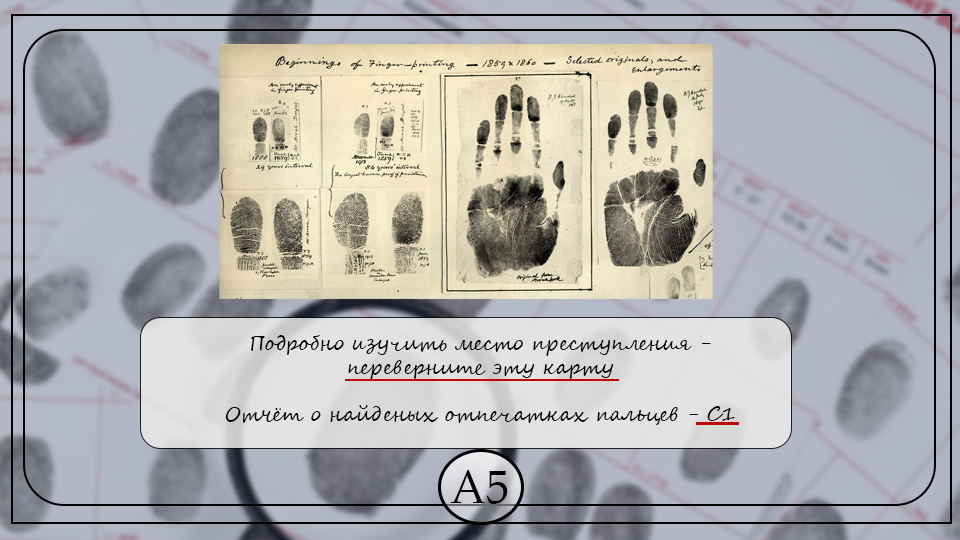
<style>
.page{position:relative;width:960px;height:540px}
.page>*{position:absolute;margin:0}
.t1{font:19.7px "SegoeScript";color:#000000}
.t2{font:46.4px "BookAntiqua";color:#000000}
</style>
<div class="page">
<p class="t1" style="left:225px;top:335px;width:510px;height:90px;text-align:center">Подробно изучить место преступления - переверните эту карту<br><br>Отчёт о найденых отпечатках пальцев - C1</p>
<p class="t2" style="left:450px;top:470px;width:58px;height:34px">A5</p>
</div>
